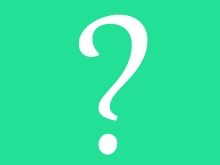
<style>
.page{position:relative;width:220px;height:165px;background:#22e197}
.page>*{position:absolute;margin:0}
.t1{font:238.7px "Gabriola";letter-spacing:0.05em;color:#ffffff}
</style>
<div class="page">
<p class="t1" style="left:78px;top:14px;width:70px;height:141px">?</p>
</div>
